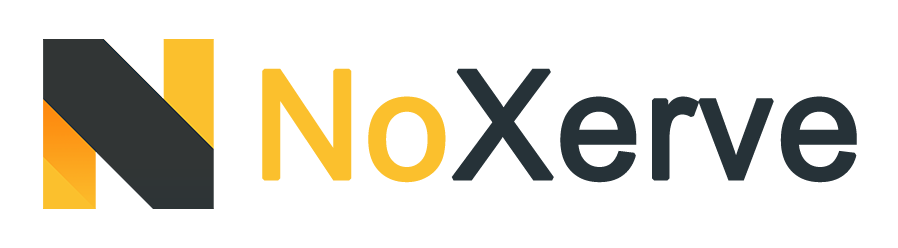
<style>
.page{position:relative;width:898px;height:248px;background:#ffffff}
.page>*{position:absolute;margin:0}
.t1{font:150px "ArialMT";color:#263238;font-weight:bold}
.t2{font:150px "ArialMT";color:#fbc02d;font-weight:bold}
</style>
<div class="page">
<p class="t1" style="left:262px;top:68px;width:595px;height:115px"><span class="t2">No</span>Xerve</p>
</div>
